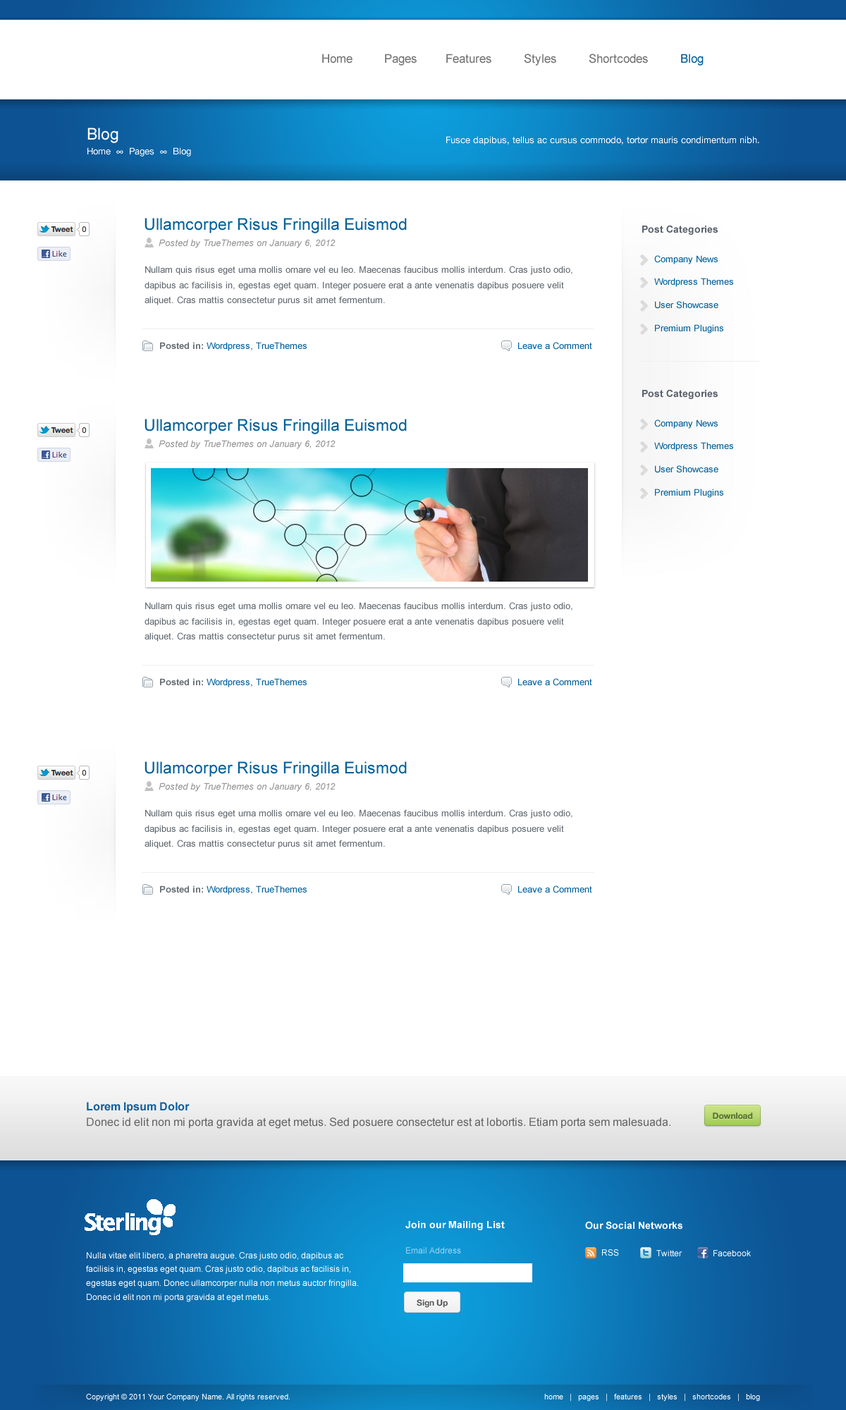
<style>
.page{position:relative;width:846px;height:1410px;background:#ffffff}
.page>*{position:absolute;margin:0}
.t1{font:12px "ArialMT";color:#727272}
.t2{font:12px "ArialMT";color:#005f99}
.t3{font:16.2px "ArialMT";color:#ffffff}
.t4{font:9.2px "HelveticaNeue";color:#ffffff}
.t5{font:16.2px "ArialMT";color:#005f99}
.t6{font:9.9px "Arial-BoldMT";color:#5b626d}
.t7{font:9.2px "Arial-ItalicMT";color:#999999}
.t8{font:9.2px "ArialMT";color:#005f99}
.t9{font:9.2px/15.2px "ArialMT";color:#636b72}
.t10{font:9.2px "Arial-BoldMT";color:#636b72}
.t11{font:11.3px "Arial-BoldMT";color:#0d60a0}
.t12{font:11.3px "ArialMT";color:#666666}
.t13{font:8.5px "HelveticaNeue-Bold";color:#5d7731}
.t14{font:9.9px "Arial-BoldMT";color:#ffffff}
.t15{font:8.5px/13.9px "ArialMT";color:#ffffff}
.t16{font:8.5px "ArialMT";color:#9ed6ef}
.t17{font:8.5px "ArialMT";color:#ffffff}
.t18{font:8.5px "HelveticaNeue-Bold";color:#555555}
.t19{font:7.8px "ArialMT";color:#ffffff}
</style>
<div class="page">
<p class="t1" style="left:322px;top:54px;width:381px;height:12px">Home         Pages        Features         Styles         Shortcodes         <span class="t2">Blog</span></p>
<p class="t3" style="left:87px;top:128px;width:31px;height:15px">Blog</p>
<p class="t4" style="left:446px;top:136px;width:313px;height:9px">Fusce dapibus, tellus ac cursus commodo, tortor mauris condimentum nibh.</p>
<p class="t4" style="left:87px;top:147px;width:104px;height:9px">Home  ∞  Pages  ∞  Blog</p>
<p class="t5" style="left:144px;top:218px;width:263px;height:15px">Ullamcorper Risus Fringilla Euismod</p>
<p class="t6" style="left:642px;top:225px;width:76px;height:10px">Post Categories</p>
<p class="t7" style="left:159px;top:239px;width:177px;height:9px">Posted by TrueThemes on January 6, 2012</p>
<p class="t8" style="left:654px;top:255px;width:64px;height:9px">Company News</p>
<p class="t9" style="left:144px;top:266px;width:428px;height:39px">Nullam quis risus eget urna mollis ornare vel eu leo. Maecenas faucibus mollis interdum. Cras justo odio, dapibus ac facilisis in, egestas eget quam. Integer posuere erat a ante venenatis dapibus posuere velit aliquet. Cras mattis consectetur purus sit amet fermentum.</p>
<p class="t8" style="left:654px;top:278px;width:79px;height:9px">Wordpress Themes</p>
<p class="t8" style="left:655px;top:301px;width:63px;height:8px">User Showcase</p>
<p class="t8" style="left:655px;top:324px;width:68px;height:9px">Premium Plugins</p>
<p class="t8" style="left:160px;top:342px;width:147px;height:9px"><span class="t10">Posted in: </span>Wordpress, TrueThemes</p>
<p class="t8" style="left:518px;top:342px;width:74px;height:8px">Leave a Comment</p>
<p class="t6" style="left:642px;top:389px;width:76px;height:10px">Post Categories</p>
<p class="t5" style="left:144px;top:419px;width:263px;height:15px">Ullamcorper Risus Fringilla Euismod</p>
<p class="t8" style="left:654px;top:419px;width:64px;height:10px">Company News</p>
<p class="t7" style="left:159px;top:440px;width:177px;height:9px">Posted by TrueThemes on January 6, 2012</p>
<p class="t8" style="left:654px;top:442px;width:79px;height:9px">Wordpress Themes</p>
<p class="t8" style="left:655px;top:465px;width:63px;height:8px">User Showcase</p>
<p class="t8" style="left:655px;top:488px;width:68px;height:10px">Premium Plugins</p>
<p class="t9" style="left:144px;top:602px;width:428px;height:39px">Nullam quis risus eget urna mollis ornare vel eu leo. Maecenas faucibus mollis interdum. Cras justo odio, dapibus ac facilisis in, egestas eget quam. Integer posuere erat a ante venenatis dapibus posuere velit aliquet. Cras mattis consectetur purus sit amet fermentum.</p>
<p class="t8" style="left:160px;top:678px;width:147px;height:9px"><span class="t10">Posted in: </span>Wordpress, TrueThemes</p>
<p class="t8" style="left:518px;top:678px;width:74px;height:8px">Leave a Comment</p>
<p class="t5" style="left:144px;top:761px;width:263px;height:16px">Ullamcorper Risus Fringilla Euismod</p>
<p class="t7" style="left:159px;top:782px;width:177px;height:10px">Posted by TrueThemes on January 6, 2012</p>
<p class="t9" style="left:144px;top:809px;width:428px;height:40px">Nullam quis risus eget urna mollis ornare vel eu leo. Maecenas faucibus mollis interdum. Cras justo odio, dapibus ac facilisis in, egestas eget quam. Integer posuere erat a ante venenatis dapibus posuere velit aliquet. Cras mattis consectetur purus sit amet fermentum.</p>
<p class="t8" style="left:160px;top:885px;width:147px;height:9px"><span class="t10">Posted in: </span>Wordpress, TrueThemes</p>
<p class="t8" style="left:518px;top:885px;width:74px;height:8px">Leave a Comment</p>
<p class="t11" style="left:87px;top:1102px;width:103px;height:11px">Lorem Ipsum Dolor</p>
<p class="t12" style="left:87px;top:1117px;width:583px;height:12px">Donec id elit non mi porta gravida at eget metus. Sed posuere consectetur est at lobortis. Etiam porta sem malesuada.</p>
<p class="t13" style="left:713px;top:1112px;width:40px;height:7px">Download</p>
<p class="t14" style="left:405px;top:1221px;width:100px;height:9px">Join our Mailing List</p>
<p class="t14" style="left:585px;top:1221px;width:97px;height:8px">Our Social Networks</p>
<p class="t15" style="left:86px;top:1252px;width:272px;height:50px">Nulla vitae elit libero, a pharetra augue. Cras justo odio, dapibus ac facilisis in, egestas eget quam. Cras justo odio, dapibus ac facilisis in, egestas eget quam. Donec ullamcorper nulla non metus auctor fringilla.<br>Donec id elit non mi porta gravida at eget metus.</p>
<p class="t16" style="left:406px;top:1247px;width:55px;height:6px">Email Address</p>
<p class="t17" style="left:602px;top:1249px;width:17px;height:7px">RSS</p>
<p class="t17" style="left:656px;top:1250px;width:26px;height:6px">Twitter</p>
<p class="t17" style="left:713px;top:1250px;width:38px;height:6px">Facebook</p>
<p class="t18" style="left:417px;top:1299px;width:31px;height:9px">Sign Up</p>
<p class="t19" style="left:86px;top:1394px;width:204px;height:7px">Copyright © 2011 Your Company Name. All rights reserved.</p>
<p class="t19" style="left:544px;top:1394px;width:216px;height:7px">home   |   pages   |   features   |   styles   |   shortcodes   |   blog</p>
</div>
